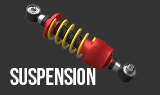
<style>
.page{position:relative;width:160px;height:95px;background:#333333}
.page>*{position:absolute;margin:0}
.t1{font:24px "BebasNeue";letter-spacing:-0.01em;color:#ffffff}
</style>
<div class="page">
<p class="t1" style="left:10px;top:68px;width:86px;height:17px">suspension</p>
</div>
